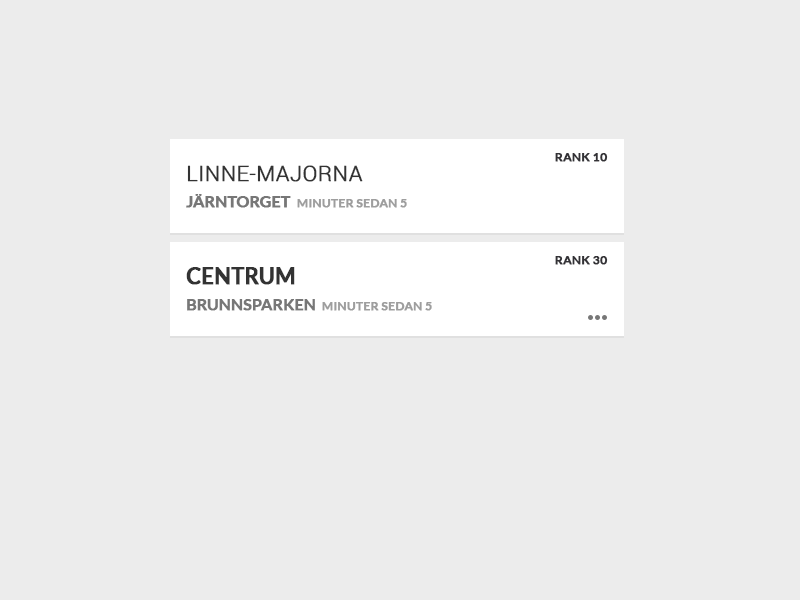
<style>
.page{position:relative;width:800px;height:600px;background:#ececec}
.page>*{position:absolute;margin:0}
.t1{font:12px "Lato-Bold";color:#333236;text-transform:uppercase;font-weight:bold}
.t2{font:21.6px "Roboto-Light";color:#333333;text-transform:uppercase;font-weight:bold}
.t3{font:15.6px "Lato-Bold";color:#777777;text-transform:uppercase;font-weight:bold}
.t4{font:12px "Lato-Bold";color:#9e9e9e;text-transform:uppercase;font-weight:bold}
.t5{font:21.6px "Lato-Bold";color:#333333;text-transform:uppercase;font-weight:bold}
</style>
<div class="page">
<p class="t1" style="left:555px;top:153px;width:53px;height:9px">rank 10</p>
<p class="t2" style="left:187px;top:165px;width:176px;height:17px">Linne-majorna</p>
<p class="t3" style="left:186px;top:194px;width:105px;height:14px">järntorget</p>
<p class="t4" style="left:297px;top:199px;width:110px;height:9px">5 minuter sedan</p>
<p class="t1" style="left:555px;top:256px;width:53px;height:9px">rank 30</p>
<p class="t5" style="left:186px;top:267px;width:109px;height:18px">Centrum</p>
<p class="t3" style="left:187px;top:299px;width:128px;height:12px">Brunnsparken</p>
<p class="t4" style="left:322px;top:302px;width:110px;height:9px">5 minuter sedan</p>
</div>
